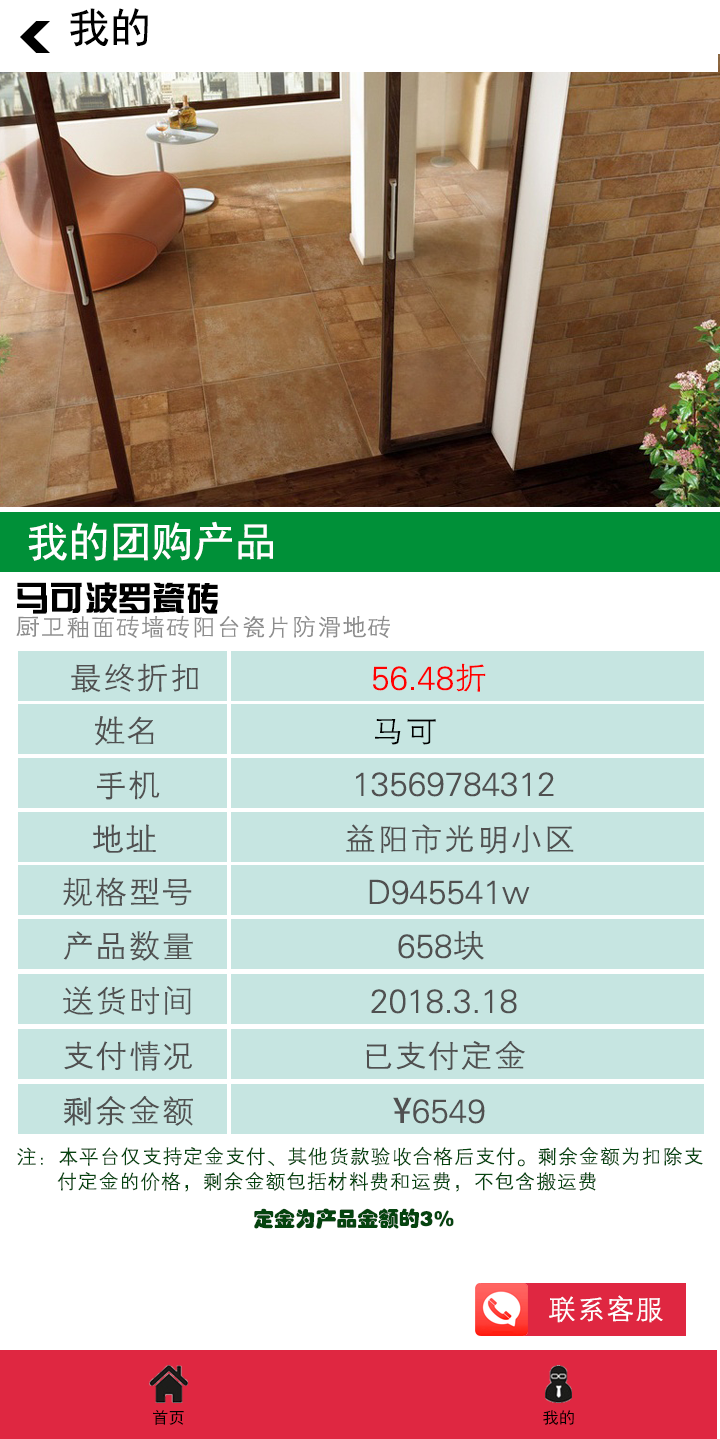
<style>
.page{position:relative;width:720px;height:1439px;background:#c6e5e1}
.page>*{position:absolute;margin:0}
.t1{font:41.7px "SimHei";color:#000000}
.t2{font:41.7px "SimHei";color:#ffffff}
.t3{font:25px/33.3px "FZXH1JW--GB1-0";color:#8d8d8d}
.t4{font:34px/33.3px "FZZYJW--GB1-0";color:#000000}
.t5{font:33.3px "FZXH1JW--GB1-0";color:#505050}
.t6{font:33.3px "FZXH1JW--GB1-0";color:#ff0000}
.t7{font:33.3px "FZXH1JW--GB1-0";color:#000000}
.t8{font:33.3px "AdobeHeitiStd-Regular";color:#505050}
.t9{font:20.8px/25px "FZXH1JW--GB1-0";color:#05440f}
.t10{font:20.8px "FZHPJW--GB1-0";color:#05440f}
.t11{font:29.2px "FZXH1JW--GB1-0";color:#ffffff}
.t12{font:16.3px "SimHei";color:#000000}
</style>
<div class="page">
<p class="t1" style="left:70px;top:8px;width:78px;height:39px">我的</p>
<p class="t2" style="left:28px;top:521px;width:245px;height:40px">我的团购产品</p>
<p class="t3" style="left:16px;top:582px;width:374px;height:57px"><span class="t4">马可波罗瓷砖<br></span>厨卫釉面砖墙砖阳台瓷片防滑地砖</p>
<p class="t5" style="left:71px;top:663px;width:127px;height:30px">最终折扣</p>
<p class="t6" style="left:373px;top:663px;width:113px;height:29px">56.48折</p>
<p class="t5" style="left:95px;top:716px;width:59px;height:30px">姓名</p>
<p class="t7" style="left:375px;top:719px;width:61px;height:26px">马可</p>
<p class="t5" style="left:97px;top:770px;width:63px;height:30px">手机</p>
<p class="t5" style="left:356px;top:772px;width:198px;height:25px">13569784312</p>
<p class="t5" style="left:93px;top:824px;width:63px;height:29px">地址</p>
<p class="t5" style="left:346px;top:824px;width:228px;height:30px">益阳市光明小区</p>
<p class="t5" style="left:63px;top:877px;width:129px;height:30px">规格型号</p>
<p class="t5" style="left:369px;top:879px;width:161px;height:26px">D945541w</p>
<p class="t5" style="left:63px;top:931px;width:130px;height:30px">产品数量</p>
<p class="t5" style="left:398px;top:931px;width:86px;height:29px">658块</p>
<p class="t5" style="left:63px;top:986px;width:128px;height:29px">送货时间</p>
<p class="t5" style="left:371px;top:989px;width:146px;height:25px">2018.3.18</p>
<p class="t5" style="left:64px;top:1041px;width:128px;height:30px">支付情况</p>
<p class="t5" style="left:366px;top:1041px;width:159px;height:30px">已支付定金</p>
<p class="t5" style="left:64px;top:1096px;width:129px;height:30px">剩余金额</p>
<p class="t5" style="left:393px;top:1097px;width:92px;height:27px"><span class="t8">¥</span>6549</p>
<p class="t9" style="left:17px;top:1146px;width:686px;height:46px">注：本平台仅支持定金支付、其他货款验收合格后支付。剩余金额为扣除支<br>       付定金的价格，剩余金额包括材料费和运费，不包含搬运费</p>
<p class="t10" style="left:254px;top:1208px;width:200px;height:21px">定金为产品金额的3%</p>
<p class="t11" style="left:549px;top:1295px;width:114px;height:28px">联系客服</p>
<p class="t12" style="left:153px;top:1410px;width:31px;height:15px">首页</p>
<p class="t12" style="left:543px;top:1410px;width:31px;height:15px">我的</p>
</div>
